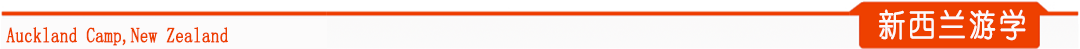
<style>
.page{position:relative;width:1080px;height:49px}
.page>*{position:absolute;margin:0}
.t1{font:31.3px "YouYuan";letter-spacing:0.1em;color:#fcfafa;font-weight:bold;scale:0.86 1}
.t2{font:20.8px "YouYuan";color:#ee4000;font-weight:bold;scale:0.81 1}
</style>
<div class="page">
<p class="t1" style="left:879px;top:9px;width:147px;height:32px">新西兰游学</p>
<p class="t2" style="left:6px;top:27px;width:222px;height:19px">Auckland Camp,New Zealand</p>
</div>
